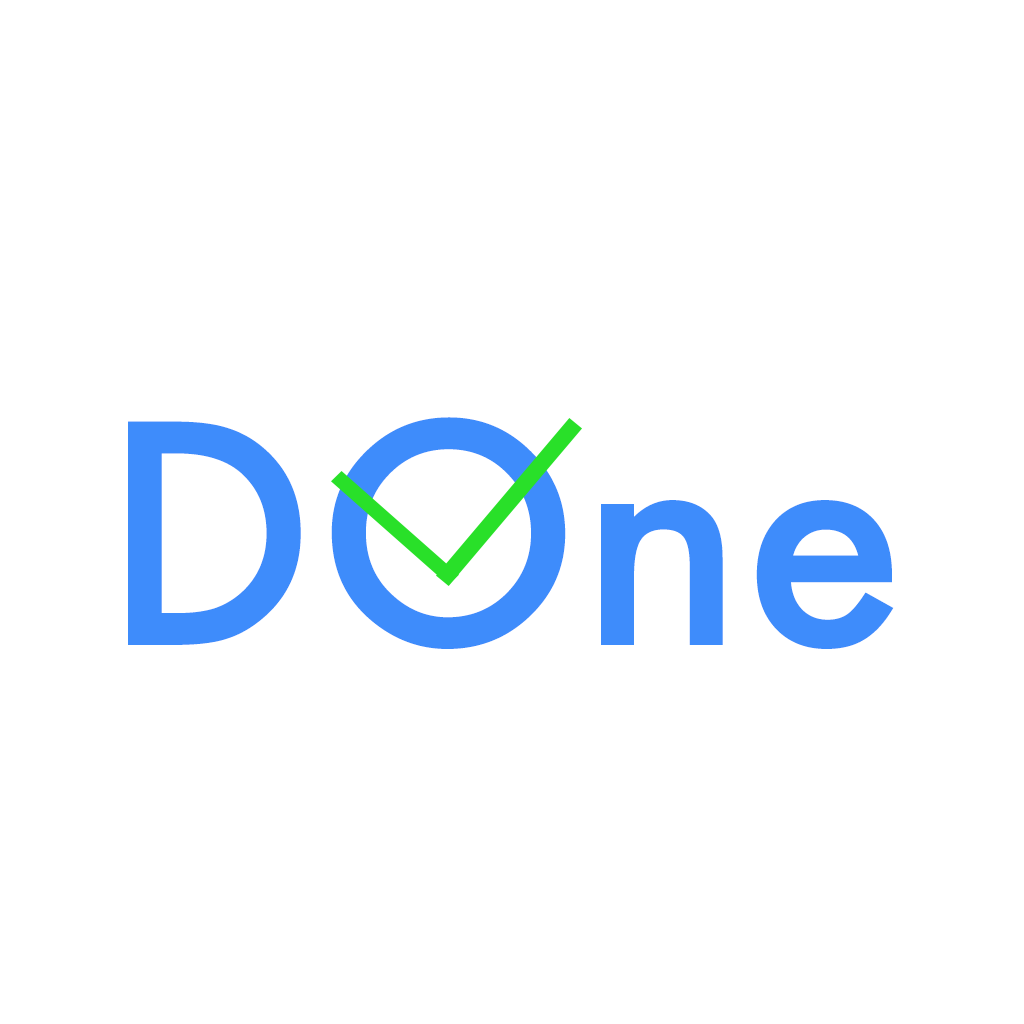
<style>
.page{position:relative;width:1024px;height:1024px;background:#ffffff}
.page>*{position:absolute;margin:0}
.t1{font:296px "Futura-Medium";color:#3e8cfb}
</style>
<div class="page">
<p class="t1" style="left:128px;top:417px;width:766px;height:232px">DOne</p>
</div>
